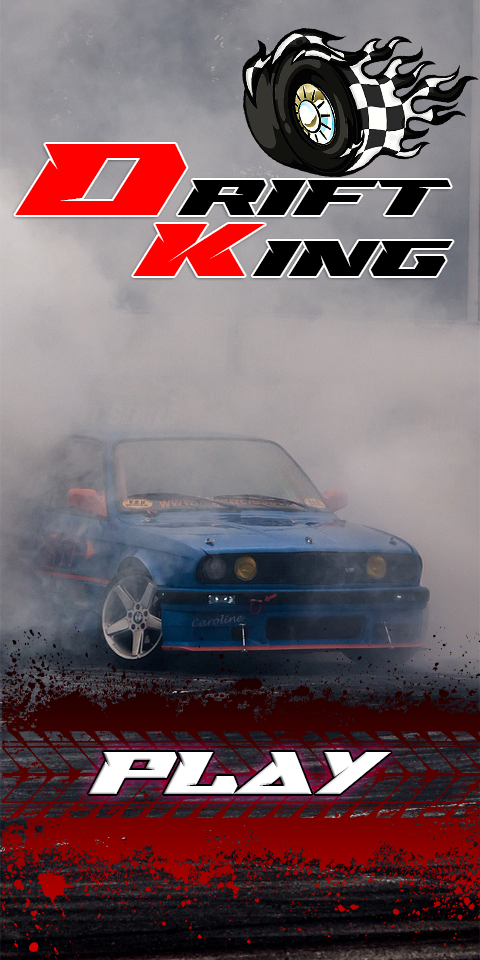
<style>
.page{position:relative;width:480px;height:960px}
.page>*{position:absolute;margin:0}
.t1{font:48px "SwipeRaceDemoRegular";color:#000000}
.t2{font:98px "SwipeRaceDemoRegular";color:#ff0000}
.t3{font:72px "SwipeRaceDemoRegular";color:#ff0000}
.t4{font:58.3px "SwipeRaceDemoRegular";color:#ffffff;scale:0.82 1}
</style>
<div class="page">
<p class="t1" style="left:15px;top:144px;width:436px;height:71px"><span class="t2">D</span>RIFT</p>
<p class="t1" style="left:133px;top:224px;width:320px;height:52px"><span class="t3">K</span>ING</p>
<p class="t4" style="left:88px;top:752px;width:303px;height:42px">PLAY</p>
</div>
